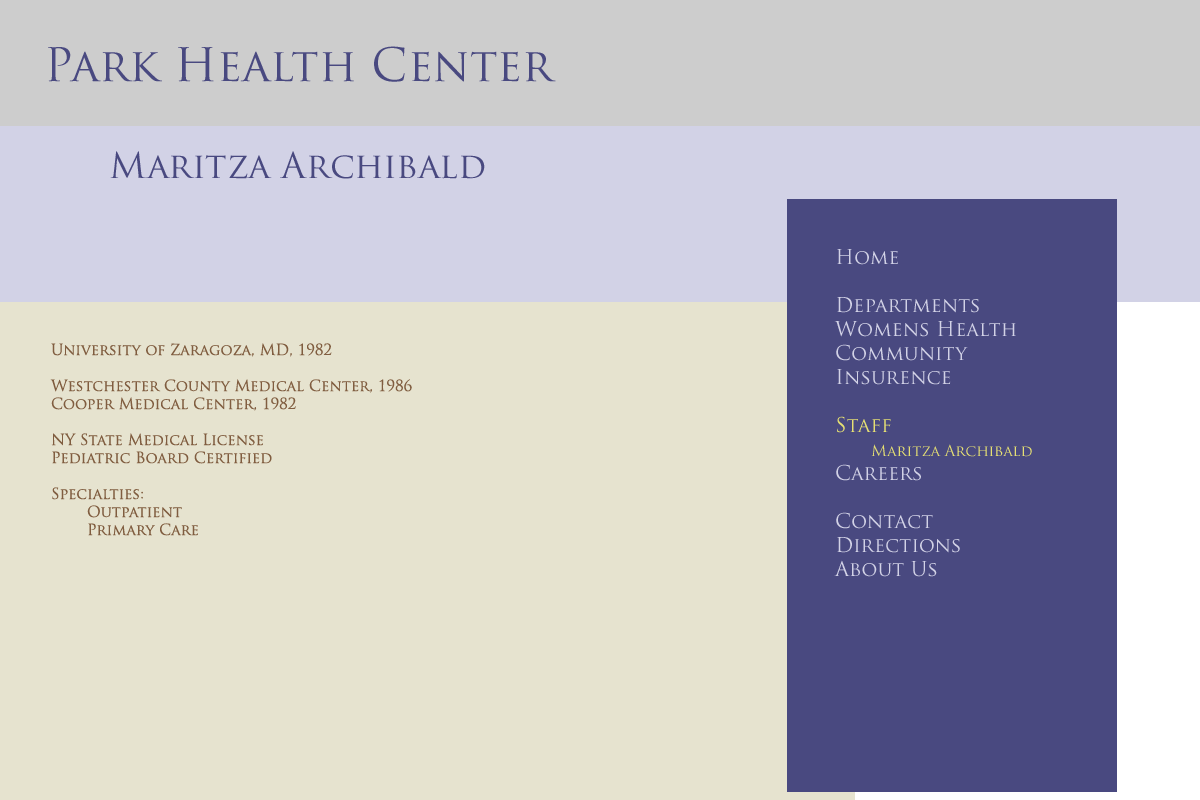
<style>
.page{position:relative;width:1200px;height:800px;background:#e6e3cf}
.page>*{position:absolute;margin:0}
.t1{font:45px "TrajanPro-Regular";color:#494980}
.t2{font:35px "TrajanPro-Regular";color:#494980}
.t3{font:20px "TrajanPro-Regular";color:#d2d2e6}
.t4{font:20px "TrajanPro-Regular";color:#e6e073}
.t5{font:15px "TrajanPro-Regular";color:#e6e073}
.t6{font:15px "TrajanPro-Regular";color:#805d40}
</style>
<div class="page">
<p class="t1" style="left:48px;top:46px;width:508px;height:36px">Park Health Center</p>
<p class="t2" style="left:110px;top:151px;width:375px;height:28px">Maritza Archibald</p>
<p class="t3" style="left:834px;top:249px;width:198px;height:328px">Home<br><br>Departments<br>Womens Health<br>Community<br>Insurence<br><br><span class="t4">Staff<br> </span><span class="t5">Maritza Archibald<br></span>Careers<br><br>Contact<br>Directions<br>About Us</p>
<p class="t6" style="left:50px;top:343px;width:362px;height:193px">University of Zaragoza, MD, 1982<br><br>Westchester County Medical Center, 1986<br>Cooper Medical Center, 1982<br><br>NY State Medical License<br>Pediatric Board Certified<br><br>Specialties:<br> Outpatient<br> Primary Care</p>
</div>
